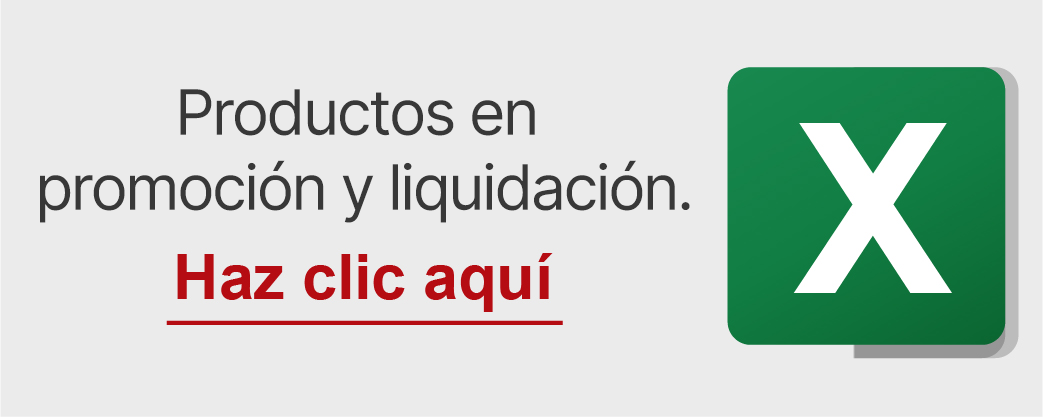
<style>
.page{position:relative;width:1043px;height:417px;background:#ebebeb}
.page>*{position:absolute;margin:0}
.t1{font:62.5px "Inter-Regular";letter-spacing:-0.04em;color:#383838}
</style>
<div class="page">
<p class="t1" style="left:40px;top:89px;width:650px;height:134px;text-align:center">Productos en <br>promoción y liquidación.</p>
</div>
